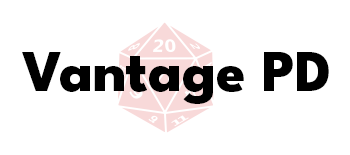
<style>
.page{position:relative;width:350px;height:155px;background:#ffffff}
.page>*{position:absolute;margin:0}
.t1{font:59px "LeagueSpartan-ExtraBold";color:#000000}
</style>
<div class="page">
<p class="t1" style="left:22px;top:52px;width:307px;height:52px">Vantage PD</p>
</div>
